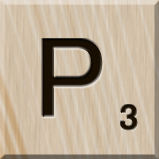
<style>
.page{position:relative;width:159px;height:159px}
.page>*{position:absolute;margin:0}
.t1{font:116px "MS-UIGothic";color:#180e01}
.t2{font:36px "MS-UIGothic";color:#1c1101;font-weight:bold;scale:1.1 1}
</style>
<div class="page">
<p class="t1" style="left:42px;top:39px;width:61px;height:78px">P</p>
<p class="t2" style="left:120px;top:104px;width:18px;height:27px">3</p>
</div>
